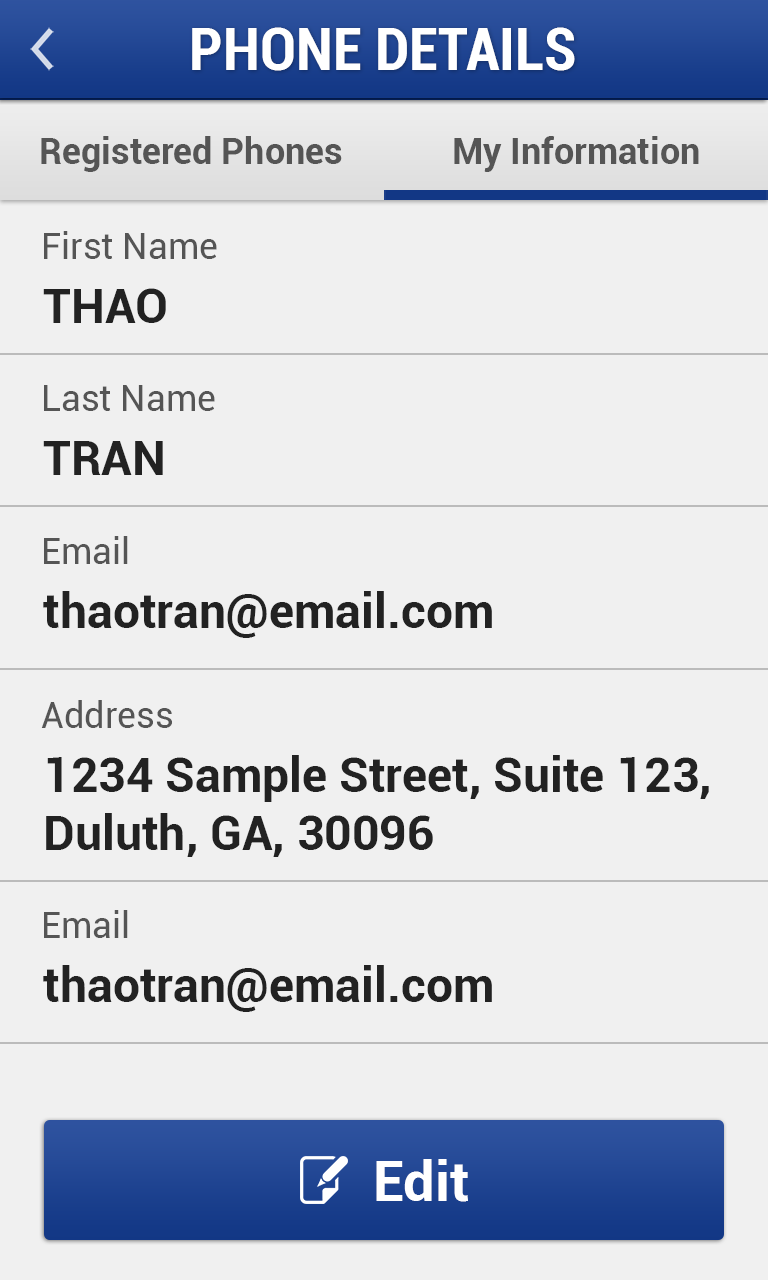
<style>
.page{position:relative;width:768px;height:1280px;background:#f0f0f0}
.page>*{position:absolute;margin:0}
.t1{font:60px "Roboto-BoldCondensed";color:#ffffff}
.t2{font:36px "Roboto-Bold";color:#555555}
.t3{font:36px "Roboto-Regular";color:#555555}
.t4{font:48px "Roboto-Bold";color:#222222}
.t5{font:56px "Roboto-Bold";color:#ffffff}
</style>
<div class="page">
<p class="t1" style="left:192px;top:27px;width:383px;height:44px">PHONE DETAILS</p>
<p class="t2" style="left:41px;top:136px;width:301px;height:36px">Registered Phones</p>
<p class="t2" style="left:454px;top:136px;width:245px;height:36px">My Information</p>
<p class="t3" style="left:44px;top:231px;width:173px;height:28px">First Name</p>
<p class="t4" style="left:43px;top:288px;width:123px;height:35px">THAO</p>
<p class="t3" style="left:44px;top:385px;width:171px;height:26px">Last Name</p>
<p class="t4" style="left:43px;top:441px;width:120px;height:34px">TRAN</p>
<p class="t3" style="left:44px;top:536px;width:84px;height:28px">Email</p>
<p class="t4" style="left:43px;top:591px;width:449px;height:47px">thaotran@email.com</p>
<p class="t3" style="left:41px;top:700px;width:131px;height:28px">Address</p>
<p class="t4" style="left:46px;top:755px;width:663px;height:102px">1234 Sample Street, Suite 123,<br>Duluth, GA, 30096</p>
<p class="t3" style="left:44px;top:910px;width:84px;height:28px">Email</p>
<p class="t4" style="left:43px;top:965px;width:449px;height:47px">thaotran@email.com</p>
<p class="t5" style="left:376px;top:1159px;width:92px;height:43px">Edit</p>
</div>
